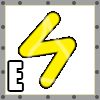
<style>
.page{position:relative;width:100px;height:100px;background:#ffffff}
.page>*{position:absolute;margin:0}
.t1{font:34.7px "Impact";color:#ffffff}
</style>
<div class="page">
<p class="t1" style="left:9px;top:62px;width:13px;height:28px">E</p>
</div>
